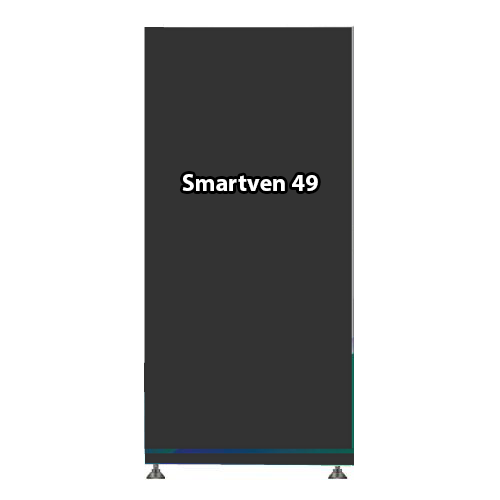
<style>
.page{position:relative;width:500px;height:500px;background:#ffffff}
.page>*{position:absolute;margin:0}
.t1{font:24.2px "MyriadPro-Bold";color:#ffffff}
</style>
<div class="page">
<p class="t1" style="left:182px;top:174px;width:136px;height:17px">Smartven 49</p>
</div>
